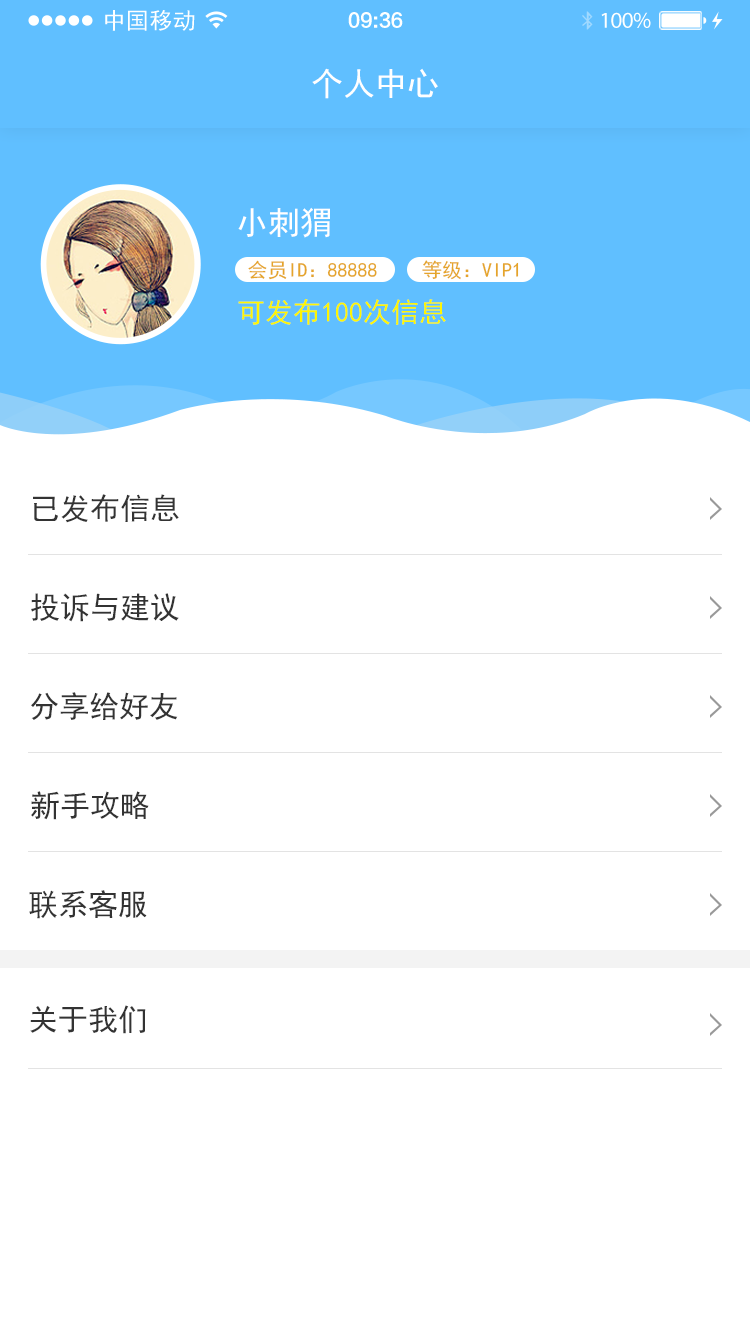
<style>
.page{position:relative;width:750px;height:1334px;background:#ffffff}
.page>*{position:absolute;margin:0}
.t1{font:22.8px "SimHei";letter-spacing:0.02em;color:#ffffff}
.t2{font:19px "FZLTCHJW--GB1-0";letter-spacing:-0.02em;color:#ffffff}
.t3{font:22.8px "MyriadPro-Regular";letter-spacing:-0.02em;color:#ffffff}
.t4{font:32px "SimHei";color:#ffffff}
.t5{font:20px "SimHei";color:#e5a529}
.t6{font:28px "SimHei";color:#fef503}
.t7{font:30px "SimHei";color:#333333}
</style>
<div class="page">
<p class="t1" style="left:105px;top:10px;width:90px;height:21px">中国移动</p>
<p class="t2" style="left:348px;top:12px;width:55px;height:16px">09:36</p>
<p class="t3" style="left:601px;top:12px;width:50px;height:16px">100%</p>
<p class="t4" style="left:312px;top:68px;width:126px;height:31px">个人中心</p>
<p class="t4" style="left:238px;top:207px;width:92px;height:31px">小刺猬</p>
<p class="t5" style="left:248px;top:260px;width:129px;height:20px">会员ID：88888</p>
<p class="t5" style="left:422px;top:260px;width:97px;height:20px">等级：VIP1</p>
<p class="t6" style="left:238px;top:299px;width:208px;height:26px">可发布100次信息</p>
<p class="t7" style="left:33px;top:494px;width:146px;height:29px">已发布信息</p>
<p class="t7" style="left:31px;top:593px;width:148px;height:29px">投诉与建议</p>
<p class="t7" style="left:31px;top:692px;width:147px;height:28px">分享给好友</p>
<p class="t7" style="left:31px;top:791px;width:118px;height:29px">新手攻略</p>
<p class="t7" style="left:29px;top:890px;width:118px;height:29px">联系客服</p>
<p class="t7" style="left:30px;top:1005px;width:116px;height:29px">关于我们</p>
</div>
